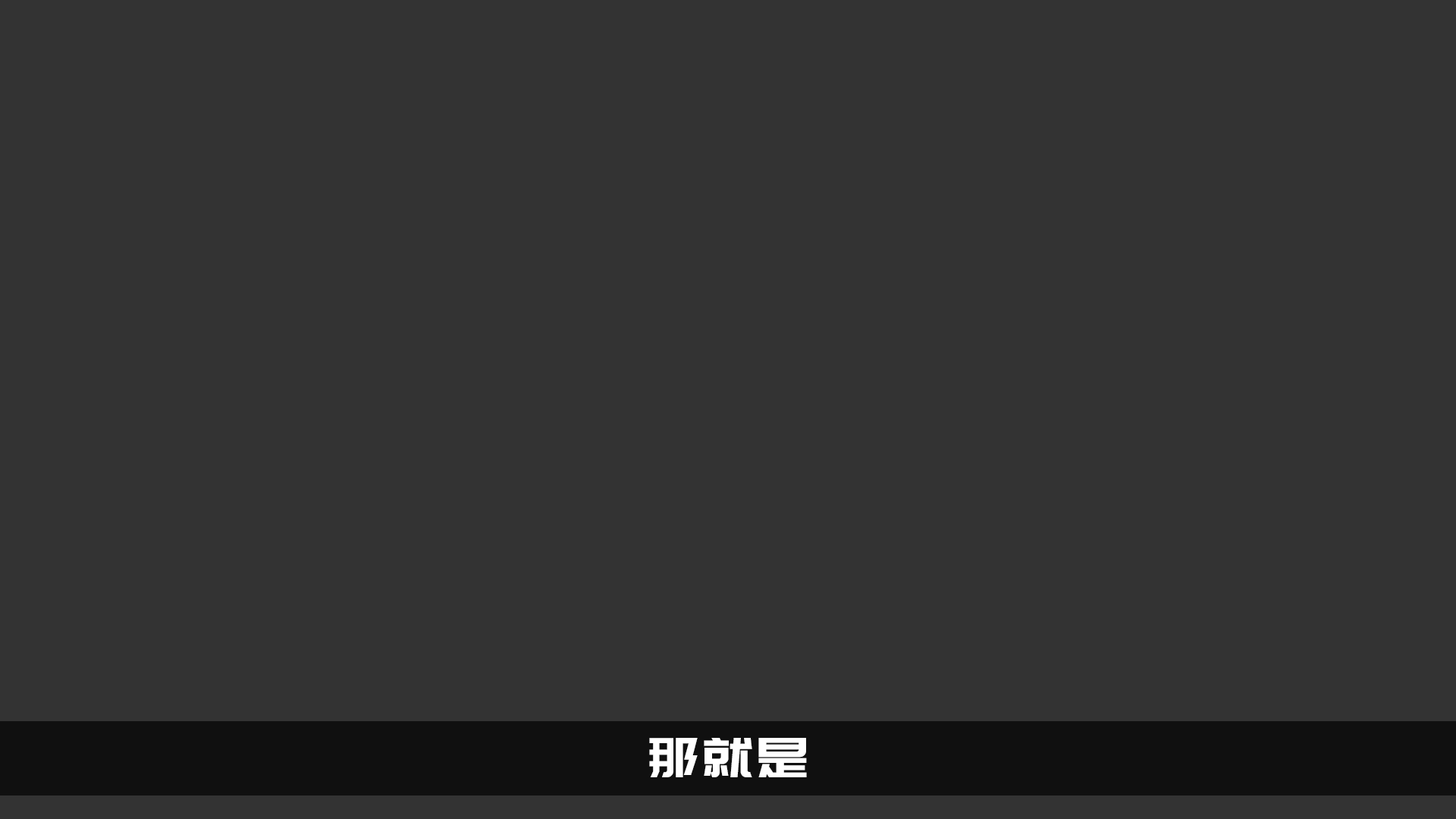
<style>
.page{position:relative;width:1456px;height:819px;background:#333333}
.page>*{position:absolute;margin:0}
.t1{font:54.6px "PangMenZhengDao-3";color:#ffffff}
</style>
<div class="page">
<p class="t1" style="left:649px;top:738px;width:158px;height:39px">那就是</p>
</div>
